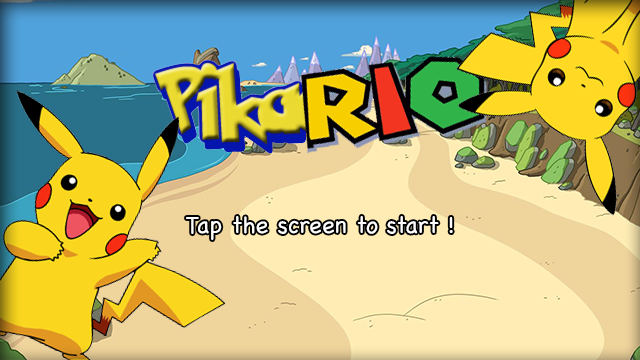
<style>
.page{position:relative;width:640px;height:360px}
.page>*{position:absolute;margin:0}
.t1{font:24px "Chalkboard";color:#ffffff}
</style>
<div class="page">
<p class="t1" style="left:186px;top:216px;width:267px;height:24px">Tap the screen to start !</p>
</div>
